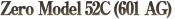
<style>
.page{position:relative;width:175px;height:19px;background:#ffffff}
.page>*{position:absolute;margin:0}
.t1{font:18px "RyuminPro-ExBold";letter-spacing:-0.08em;color:#4a3f32;font-weight:bold;scale:0.9 1}
</style>
<div class="page">
<p class="t1" style="left:0px;top:0px;width:172px;height:19px">Zero Model 52C (601 AG)</p>
</div>
